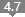
<style>
.page{position:relative;width:25px;height:17px;background:#7f7f7f}
.page>*{position:absolute;margin:0}
.t1{font:12px "MicrosoftYaHei";color:#ffffff}
</style>
<div class="page">
<p class="t1" style="left:4px;top:2px;width:17px;height:9px">4.7</p>
</div>
